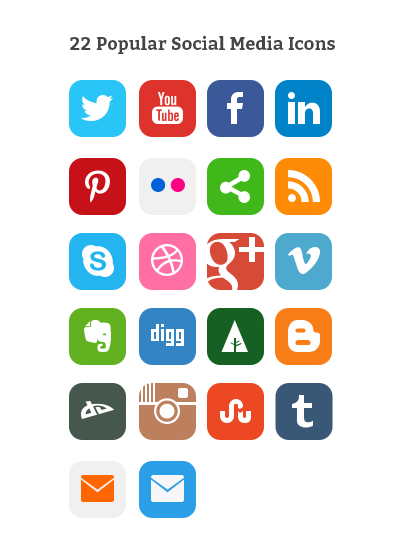
<style>
.page{position:relative;width:400px;height:550px;background:#ffffff}
.page>*{position:absolute;margin:0}
.t1{font:18px "Bitter-Bold";color:#464545}
</style>
<div class="page">
<p class="t1" style="left:70px;top:35px;width:265px;height:19px">22 Popular Social Media Icons</p>
</div>
